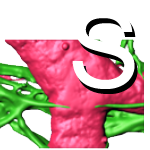
<style>
.page{position:relative;width:150px;height:150px;background:#ffffff}
.page>*{position:absolute;margin:0}
.t1{font:108px "ArialMT";color:#ffffff}
.t2{font:108px "ArialMT"}
</style>
<div class="page">
<p class="t1" style="left:72px;top:9px;width:63px;height:80px">S</p>
<p class="t2" style="left:75px;top:14px;width:63px;height:80px">S</p>
</div>
